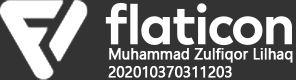
<style>
.page{position:relative;width:296px;height:80px;background:#333333}
.page>*{position:absolute;margin:0}
.t1{font:14.7px "Ebrima";color:#ffffff;font-weight:bold}
</style>
<div class="page">
<p class="t1" style="left:108px;top:48px;width:185px;height:30px">Muhammad Zulfiqor Lilhaq<br>202010370311203</p>
</div>
